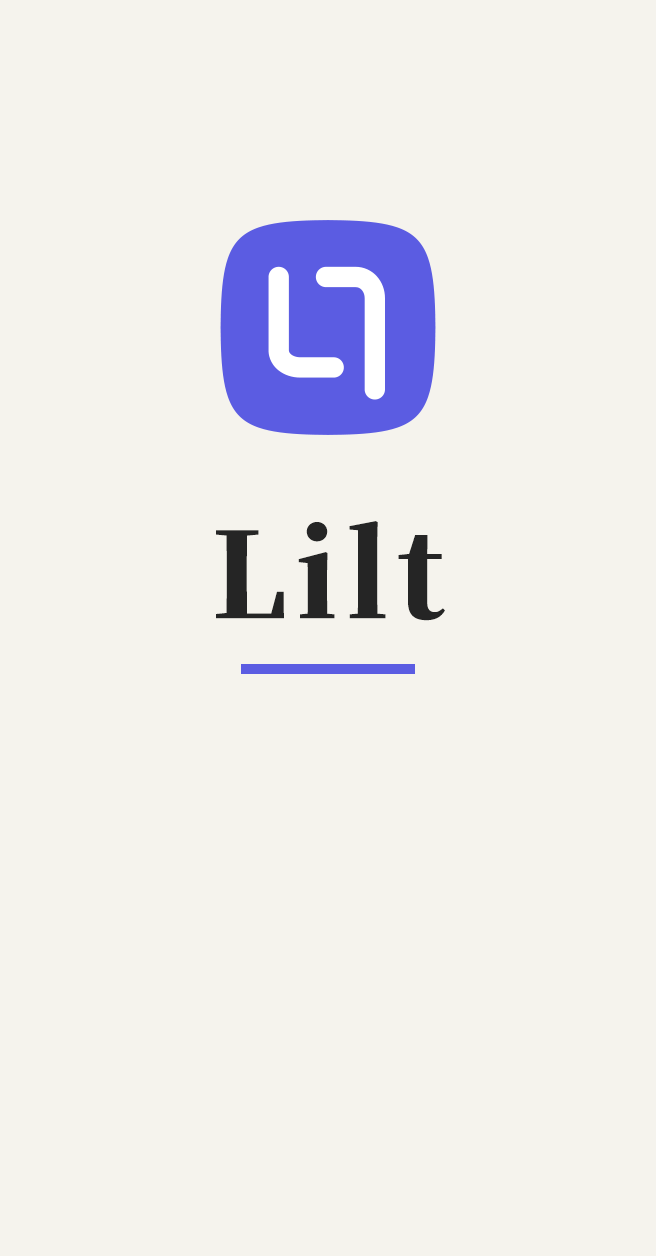
<style>
.page{position:relative;width:656px;height:1256px;background:#f5f3ed}
.page>*{position:absolute;margin:0}
.t1{font:117.3px "SourceHanSerifSCVF-Heavy";letter-spacing:0.07em;color:#252525}
</style>
<div class="page">
<p class="t1" style="left:216px;top:521px;width:229px;height:100px">Lilt</p>
</div>
